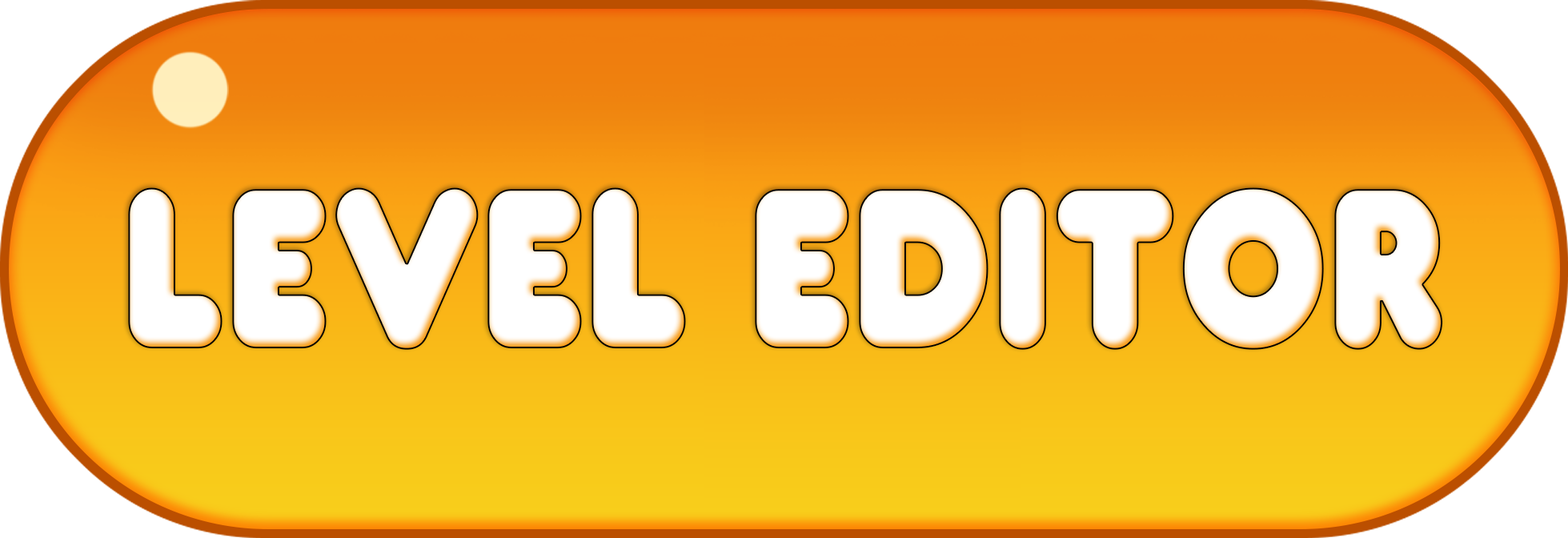
<style>
.page{position:relative;width:1568px;height:538px}
.page>*{position:absolute;margin:0}
.t1{font:276.1px "FranxurterTotallyFat";color:#ffffff;scale:0.87 1}
</style>
<div class="page">
<p class="t1" style="left:128px;top:187px;width:1315px;height:163px">LEVEL EDITOR</p>
</div>
